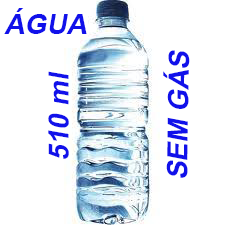
<style>
.page{position:relative;width:225px;height:225px;background:#ffffff}
.page>*{position:absolute;margin:0}
.t1{font:48px "Arial-BoldMT";color:#1111ea;font-style:italic}
</style>
<div class="page">
<p class="t1" style="left:4px;top:8px;width:83px;height:26px">ÁGUA</p>
<p class="t1" style="left:163px;top:50px;width:27px;height:128px;rotate:-89deg">SEM GÁS</p>
<p class="t1" style="left:48px;top:71px;width:21px;height:88px;rotate:-90deg">510 ml</p>
</div>
